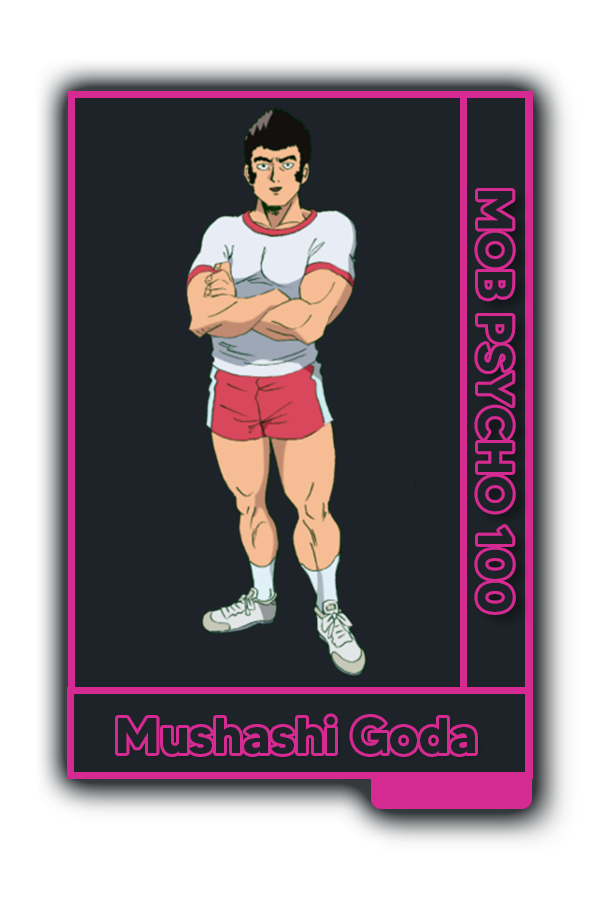
<style>
.page{position:relative;width:600px;height:900px;background:#1d2328}
.page>*{position:absolute;margin:0}
.t1{font:48.8px "MADETOMMY-Bold";color:#1d2328}
.t2{font:49.7px "MADETOMMY-Bold";color:#1d2328}
</style>
<div class="page">
<p class="t1" style="left:477px;top:191px;width:36px;height:421px;rotate:90deg">MOB PSYCHO 100</p>
<p class="t2" style="left:118px;top:716px;width:357px;height:38px">Mushashi Goda</p>
</div>
